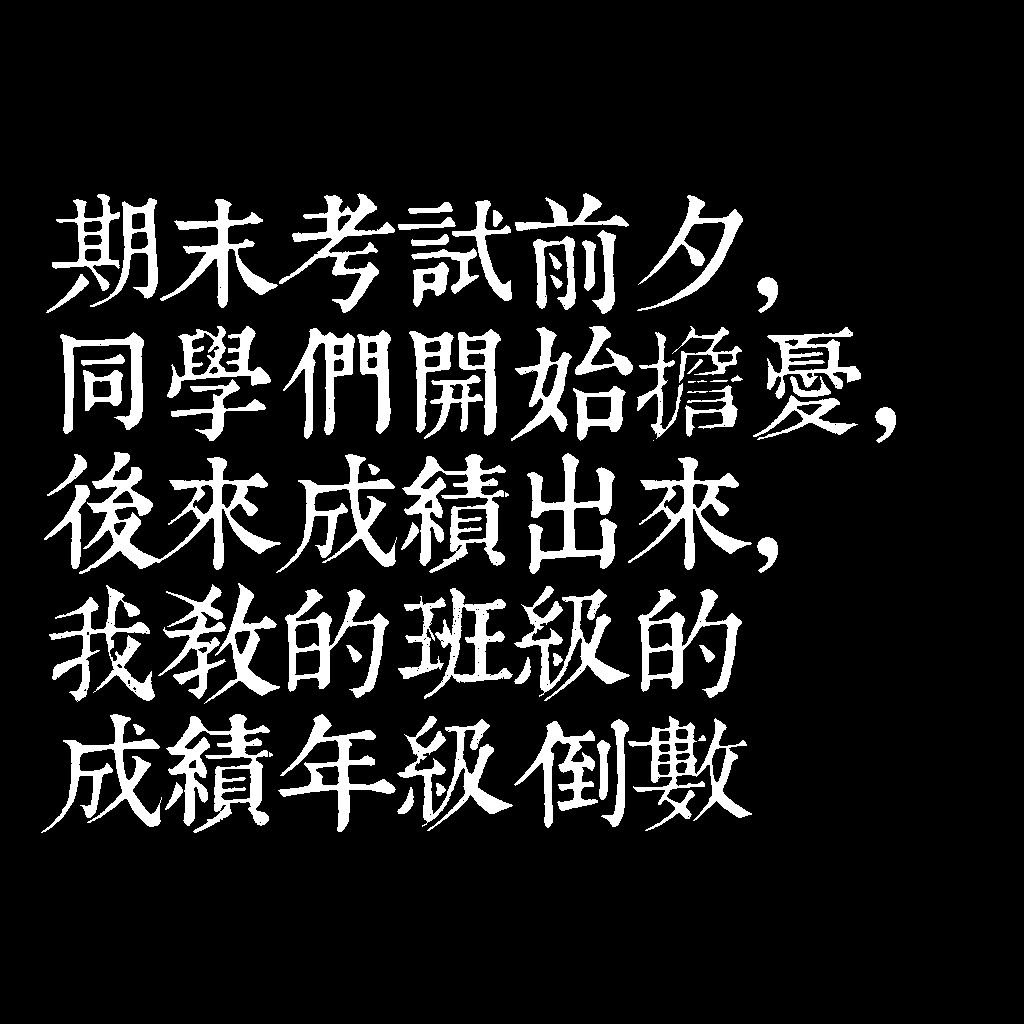
<style>
.page{position:relative;width:1024px;height:1024px;background:#000000}
.page>*{position:absolute;margin:0}
.t1{font:120px/130px "TpldKhangXiDictTrial";letter-spacing:-0.02em;color:#ffffff}
</style>
<div class="page">
<p class="t1" style="left:41px;top:193px;width:855px;height:640px">期末考試前夕，<br>同學們開始擔憂，<br>後來成績出來，<br>我教的班級的<br>成績年級倒數</p>
</div>
